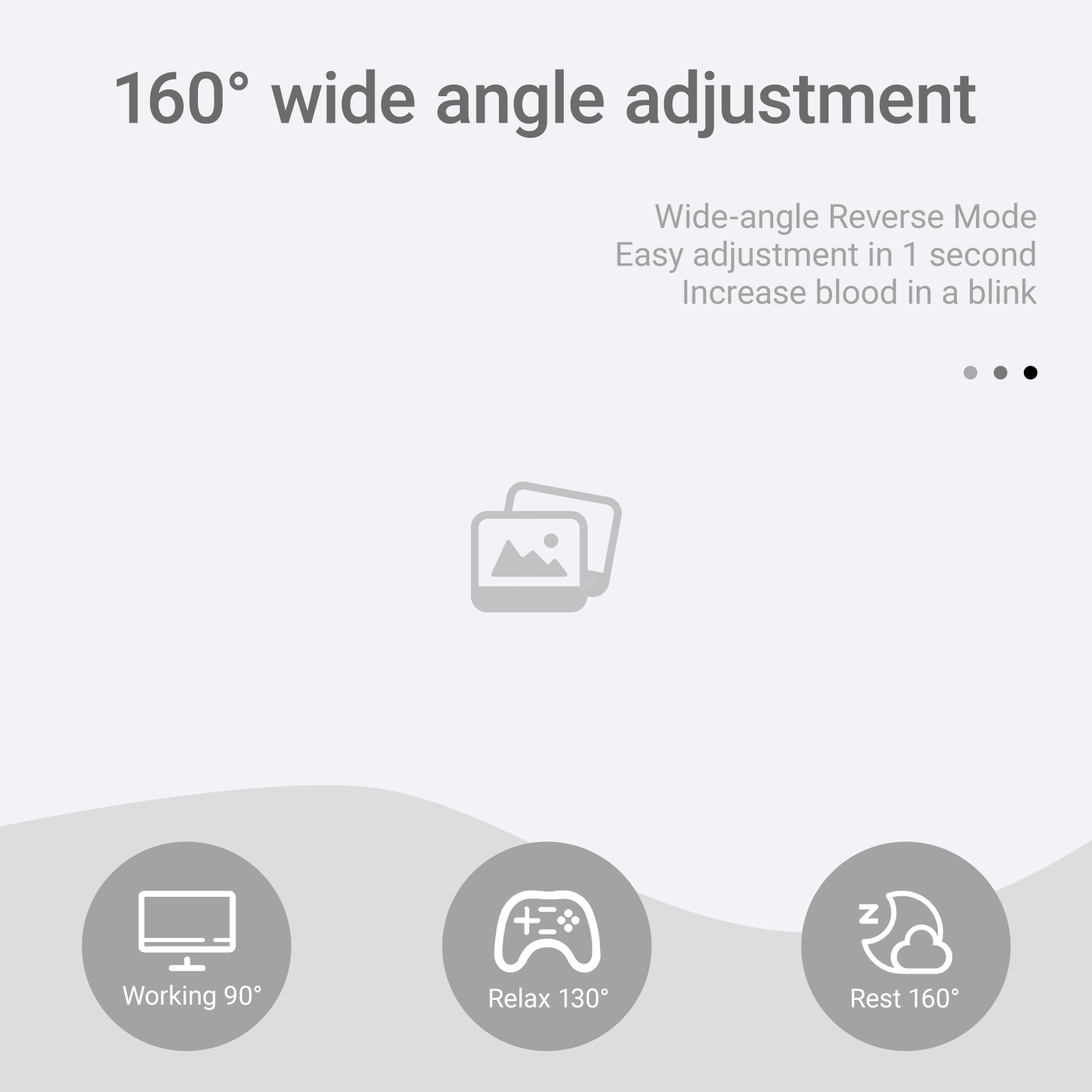
<style>
.page{position:relative;width:1092px;height:1092px;background:#f2f3f6}
.page>*{position:absolute;margin:0}
.t1{font:71.3px "Roboto-Medium";color:#6c6c6c}
.t2{font:33.5px/37.9px "Roboto-Regular";color:#a3a3a3}
.t3{font:26.2px "Roboto-Regular";color:#ffffff}
</style>
<div class="page">
<p class="t1" style="left:117px;top:69px;width:859px;height:70px">160° wide angle adjustment</p>
<p class="t2" style="left:617px;top:203px;width:420px;height:101px;text-align:right">Wide-angle Reverse Mode<br>Easy adjustment in 1 second<br>Increase blood in a blink</p>
<p class="t3" style="left:123px;top:985px;width:138px;height:25px">Working 90°</p>
<p class="t3" style="left:489px;top:988px;width:119px;height:20px">Relax 130°</p>
<p class="t3" style="left:852px;top:988px;width:107px;height:20px">Rest 160°</p>
</div>
